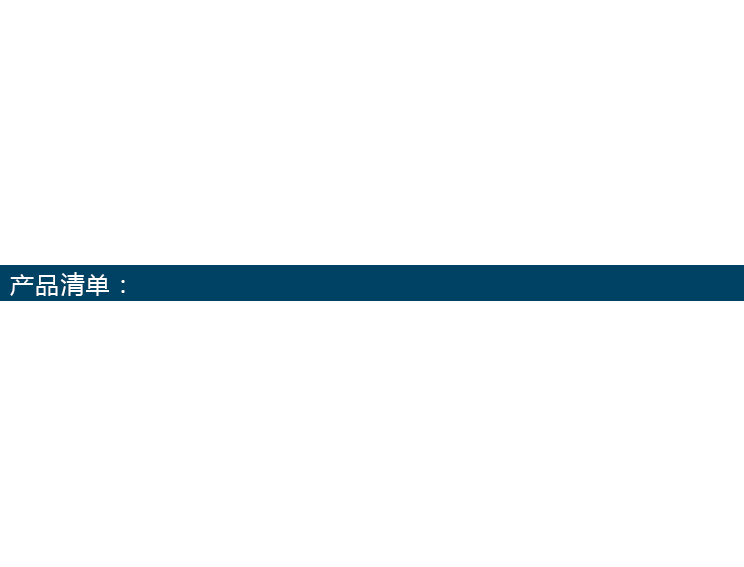
<style>
.page{position:relative;width:744px;height:567px;background:#ffffff}
.page>*{position:absolute;margin:0}
.t1{font:24px "MicrosoftYaHei";letter-spacing:0.05em;color:#ffffff}
</style>
<div class="page">
<p class="t1" style="left:10px;top:272px;width:115px;height:24px">产品清单：</p>
</div>
